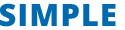
<style>
.page{position:relative;width:125px;height:30px;background:#ffffff}
.page>*{position:absolute;margin:0}
.t1{font:30.8px "OpenSans-Extrabold";letter-spacing:0.04em;color:#0069b0;text-transform:uppercase}
</style>
<div class="page">
<p class="t1" style="left:0px;top:3px;width:116px;height:24px">simple</p>
</div>
